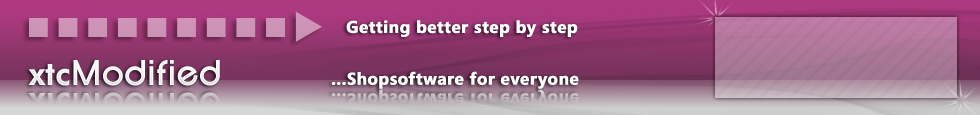
<style>
.page{position:relative;width:980px;height:115px}
.page>*{position:absolute;margin:0}
.t1{font:17px "Segoe-Bold";letter-spacing:0.01em;color:#ffffff;font-weight:bold}
.t2{font:33px "FuturaBT-Heavy";color:#ffffff}
.t3{font:37px "SFNewRepublic-Bold";color:#ffffff}
</style>
<div class="page">
<p class="t1" style="left:346px;top:20px;width:232px;height:17px">Getting better step by step</p>
<p class="t2" style="left:28px;top:64px;width:42px;height:22px">xtc</p>
<p class="t3" style="left:73px;top:60px;width:147px;height:26px">Modified</p>
<p class="t1" style="left:331px;top:71px;width:248px;height:18px">...Shopsoftware for everyone</p>
</div>
